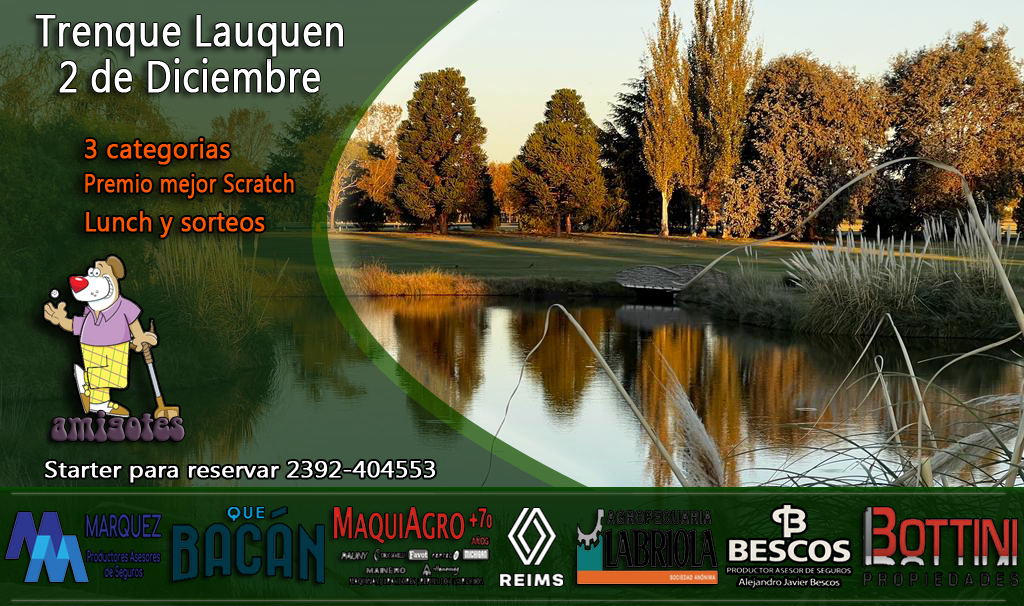
<style>
.page{position:relative;width:1024px;height:606px}
.page>*{position:absolute;margin:0}
.t1{font:44.3px "MicrosoftNewTaiLue";color:#ffffff;font-weight:bold;scale:0.87 1}
.t2{font:44.3px "MicrosoftNewTaiLue";color:#ffffff;font-weight:bold;scale:0.84 1}
.t3{font:27.2px "MicrosoftNewTaiLue";color:#ff5700;font-weight:bold;scale:0.96 1}
.t4{font:25.3px "MicrosoftNewTaiLue";color:#ff5700;font-weight:bold;scale:0.84 1}
.t5{font:27.2px "MicrosoftNewTaiLue";color:#ff5700;font-weight:bold;scale:0.92 1}
.t6{font:36.6px "BellBottom.Laser";letter-spacing:-0.04em;color:#553c52;scale:1.16 1}
.t7{font:22px "MicrosoftNewTaiLue";color:#ffffff;font-weight:bold;scale:1.12 1}
</style>
<div class="page">
<p class="t1" style="left:35px;top:15px;width:308px;height:42px">Trenque Lauquen</p>
<p class="t2" style="left:59px;top:58px;width:261px;height:35px">2 de Diciembre</p>
<p class="t3" style="left:85px;top:138px;width:145px;height:27px">3 categorias</p>
<p class="t4" style="left:85px;top:173px;width:209px;height:26px">Premio mejor Scratch</p>
<p class="t5" style="left:86px;top:211px;width:179px;height:27px">Lunch y sorteos</p>
<p class="t6" style="left:50px;top:410px;width:135px;height:32px">amigotes</p>
<p class="t7" style="left:45px;top:461px;width:391px;height:22px">Starter para reservar 2392-404553</p>
</div>
